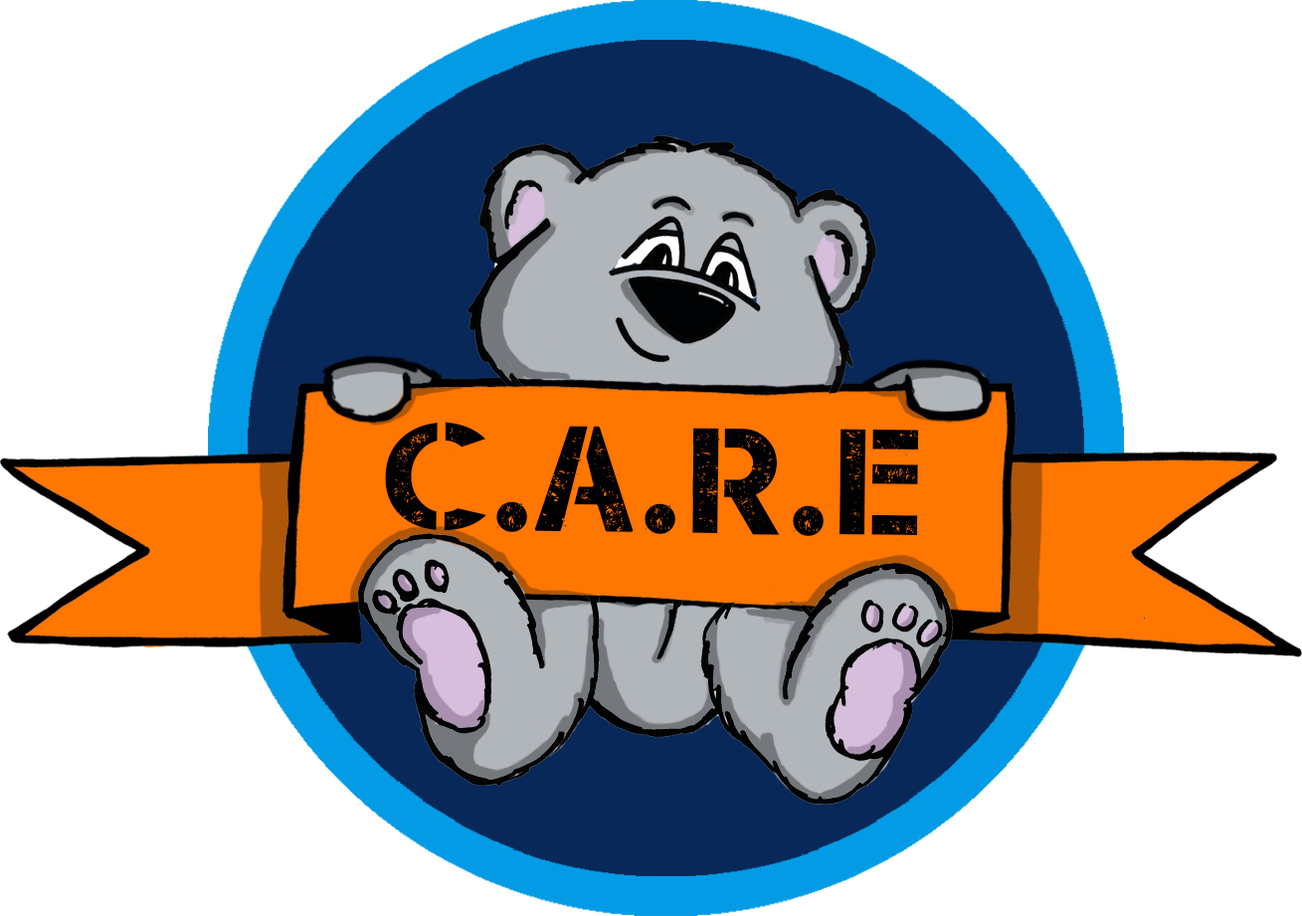
<style>
.page{position:relative;width:1302px;height:916px;background:#ffffff}
.page>*{position:absolute;margin:0}
.t1{font:149.2px "StencilArmyWWI";color:#000103}
</style>
<div class="page">
<p class="t1" style="left:385px;top:422px;width:534px;height:114px;rotate:1deg">C.A.R.E</p>
</div>
